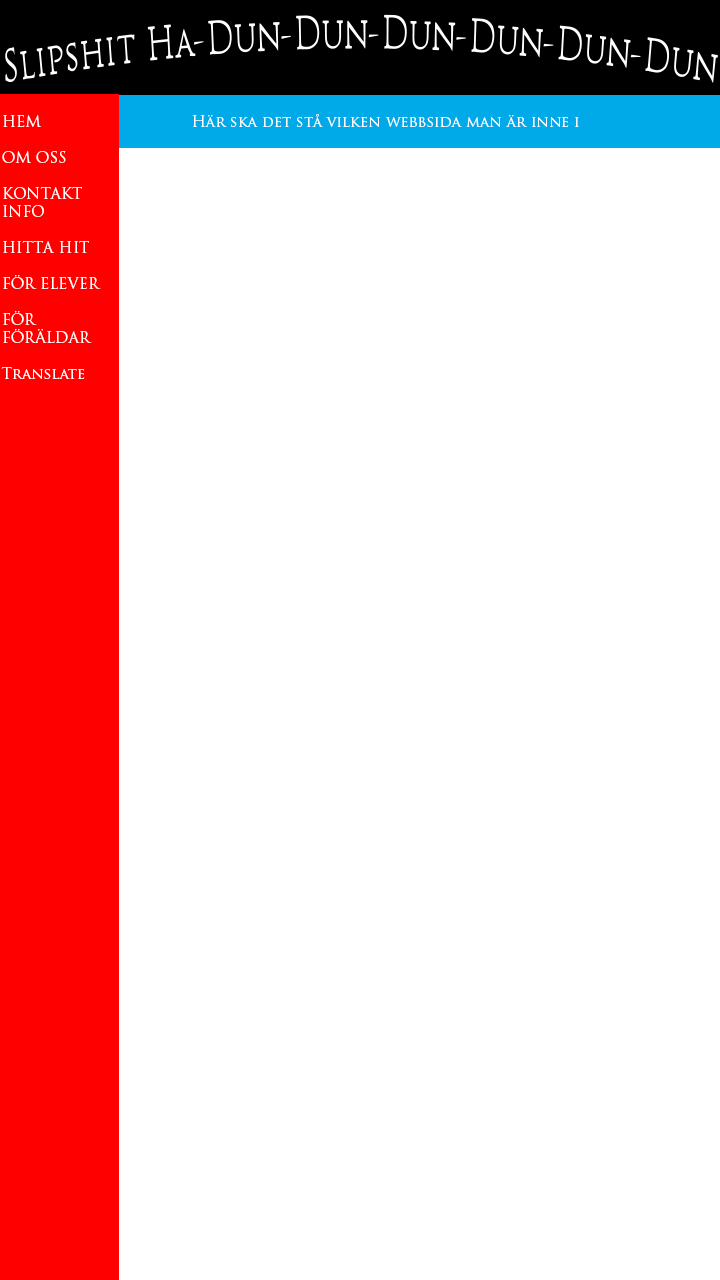
<style>
.page{position:relative;width:720px;height:1280px;background:#ffffff}
.page>*{position:absolute;margin:0}
.t1{font:15px "TrajanPro-Regular";color:#ffffff}
</style>
<div class="page">
<p class="t1" style="left:1px;top:115px;width:100px;height:264px">HEM<br><br>OM OSS<br><br>KONTAKT<br>INFO<br><br>HITTA HIT<br><br>FÖR ELEVER<br><br>FÖR <br>FÖRÄLDAR<br><br>Translate</p>
<p class="t1" style="left:192px;top:114px;width:387px;height:13px">Här ska det stå vilken webbsida man är inne i</p>
</div>
